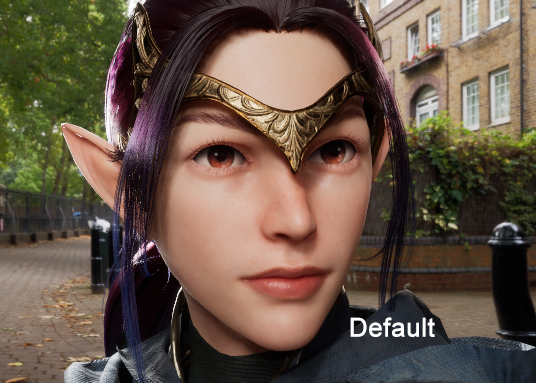
<style>
.page{position:relative;width:536px;height:383px}
.page>*{position:absolute;margin:0}
.t1{font:25.8px "ArialMT";color:#ffffff;font-weight:bold}
</style>
<div class="page">
<p class="t1" style="left:350px;top:317px;width:85px;height:20px">Default</p>
</div>
